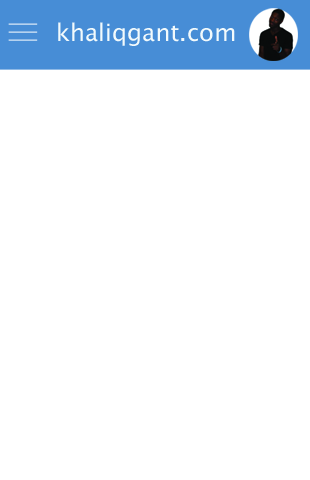
<style>
.page{position:relative;width:310px;height:480px;background:#ffffff}
.page>*{position:absolute;margin:0}
.t1{font:24px "LucidaGrande";color:#f2fafc}
</style>
<div class="page">
<p class="t1" style="left:58px;top:22px;width:177px;height:24px">khaliqgant.com</p>
</div>
